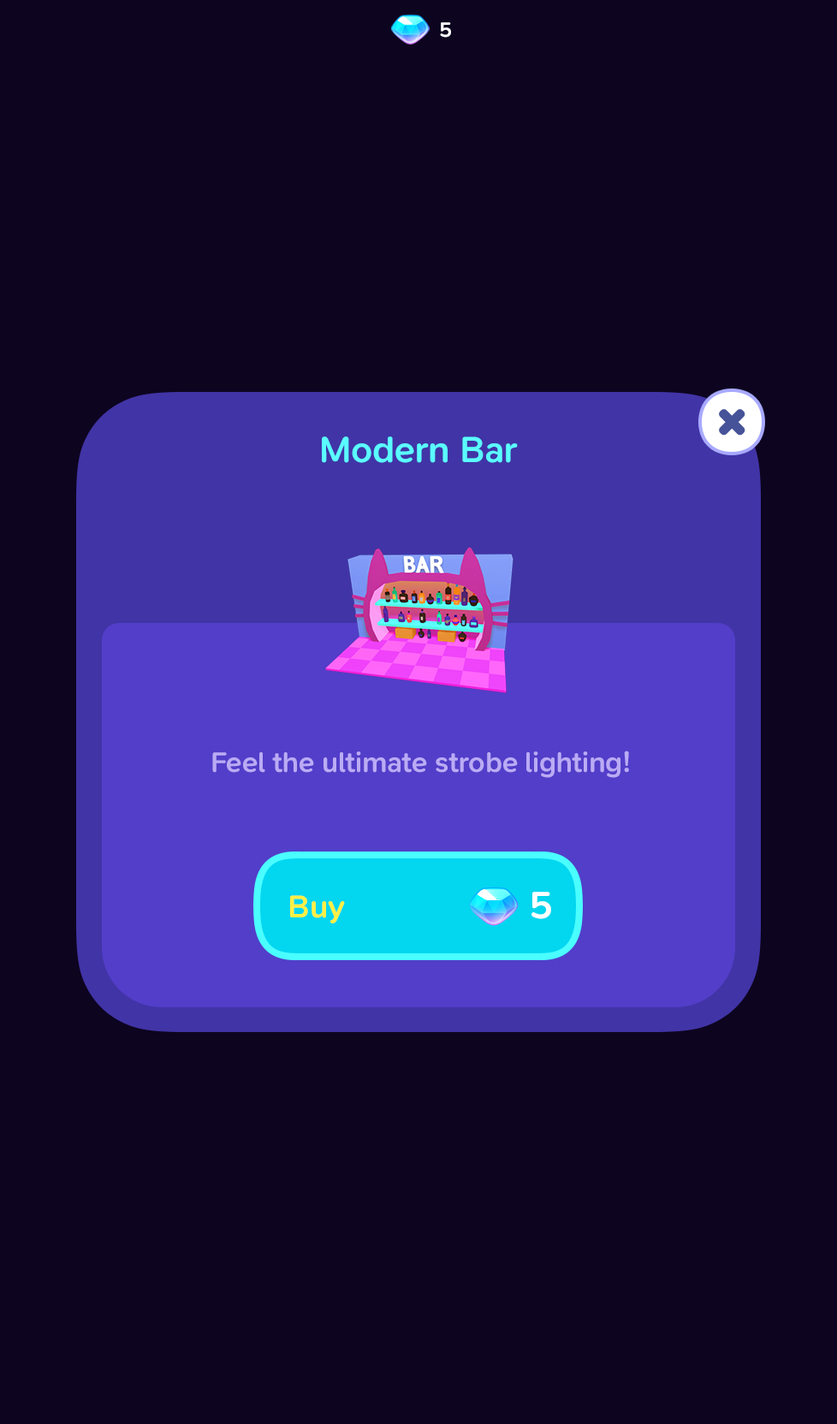
<style>
.page{position:relative;width:837px;height:1424px;background:#0d0420}
.page>*{position:absolute;margin:0}
.t1{font:21.4px "SNPro-SemiBold";letter-spacing:-0.01em;color:#ffffff}
.t2{font:37.7px "SNPro-SemiBold";letter-spacing:-0.01em;color:#5afdff}
.t3{font:29.1px "SNPro-SemiBold";letter-spacing:-0.01em;color:#bbabf4}
.t4{font:39.4px "SNPro-SemiBold";letter-spacing:-0.01em;color:#ffffff}
.t5{font:32.5px "SNPro-SemiBold";letter-spacing:-0.01em;color:#fff045}
</style>
<div class="page">
<p class="t1" style="left:440px;top:22px;width:11px;height:16px">5</p>
<p class="t2" style="left:322px;top:437px;width:196px;height:26px">Modern Bar</p>
<p class="t3" style="left:212px;top:751px;width:417px;height:27px">Feel the ultimate strobe lighting!</p>
<p class="t4" style="left:532px;top:892px;width:19px;height:27px">5</p>
<p class="t5" style="left:290px;top:895px;width:55px;height:29px">Buy</p>
</div>
